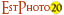
<style>
.page{position:relative;width:64px;height:15px;background:#ffffff}
.page>*{position:absolute;margin:0}
.t1{font:12.3px "TrajanPro-Regular";color:#b43f17}
.t2{font:8.2px "TrajanPro-Regular";color:#b43f17}
.t3{font:16.4px "TrajanPro-Regular";color:#b43f17}
</style>
<div class="page">
<p class="t1" style="left:1px;top:1px;width:8px;height:13px">E</p>
<p class="t2" style="left:8px;top:5px;width:11px;height:6px">st</p>
<p class="t3" style="left:18px;top:1px;width:8px;height:13px">P</p>
<p class="t2" style="left:26px;top:5px;width:24px;height:6px">hoto</p>
</div>
